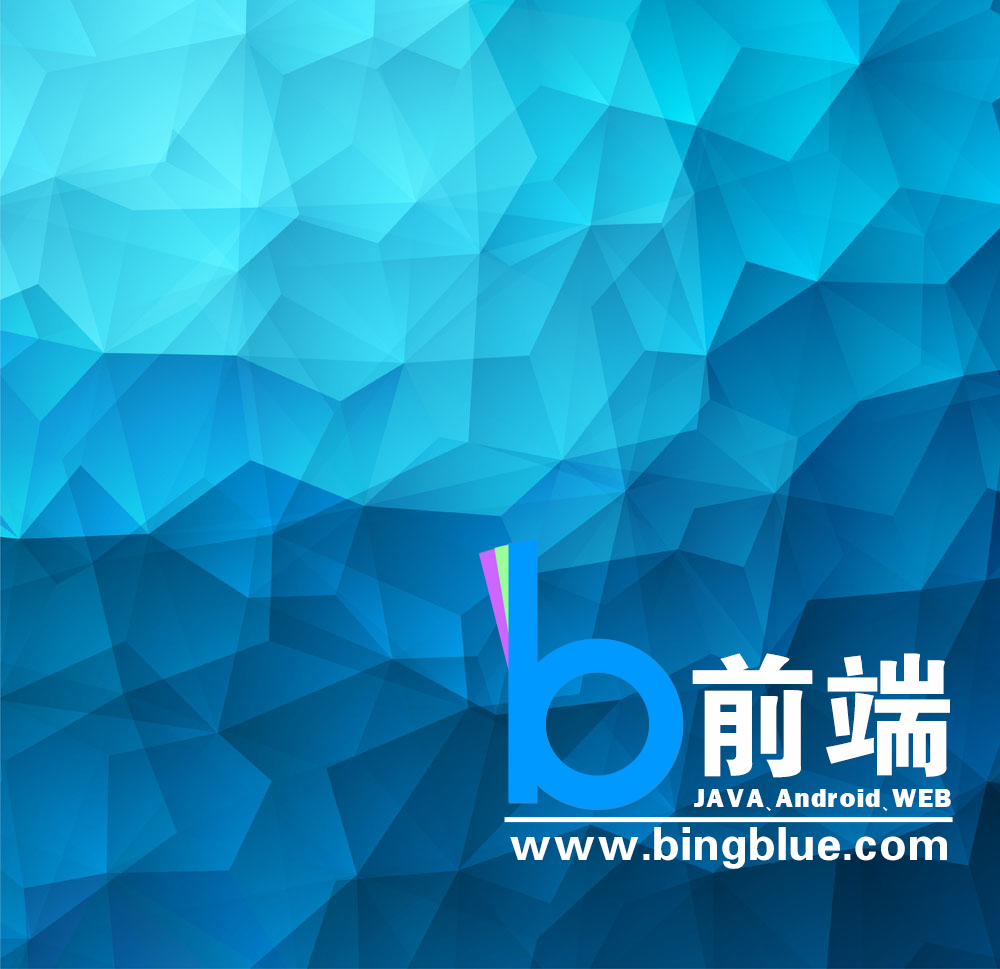
<style>
.page{position:relative;width:1000px;height:969px}
.page>*{position:absolute;margin:0}
.t1{font:133.6px "FZDHTJW--GB1-0";letter-spacing:0.1em;color:#fefefe}
.t2{font:27.1px "FranklinGothic-Heavy";letter-spacing:0.1em;color:#fefefe}
.t3{font:27.1px "HYg2gj";letter-spacing:0.1em;color:#fefefe}
.t4{font:45.4px "FZDHTJW--GB1-0";letter-spacing:0.1em;color:#ffffff}
</style>
<div class="page">
<p class="t1" style="left:692px;top:653px;width:258px;height:125px">前端</p>
<p class="t2" style="left:694px;top:789px;width:257px;height:22px">JAVA<span class="t3">、</span>Android<span class="t3">、</span>WEB</p>
<p class="t4" style="left:510px;top:827px;width:437px;height:42px">www.bingblue.com</p>
</div>
